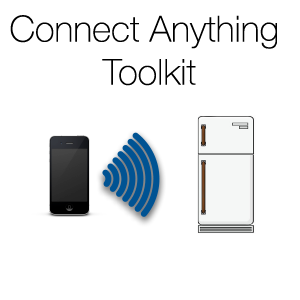
<style>
.page{position:relative;width:300px;height:300px;background:#ffffff}
.page>*{position:absolute;margin:0}
.t1{font:36px "HelveticaNeue-Thin";letter-spacing:0.005em;color:#000000}
</style>
<div class="page">
<p class="t1" style="left:10px;top:15px;width:267px;height:71px;text-align:center">Connect Anything <br>Toolkit</p>
</div>
